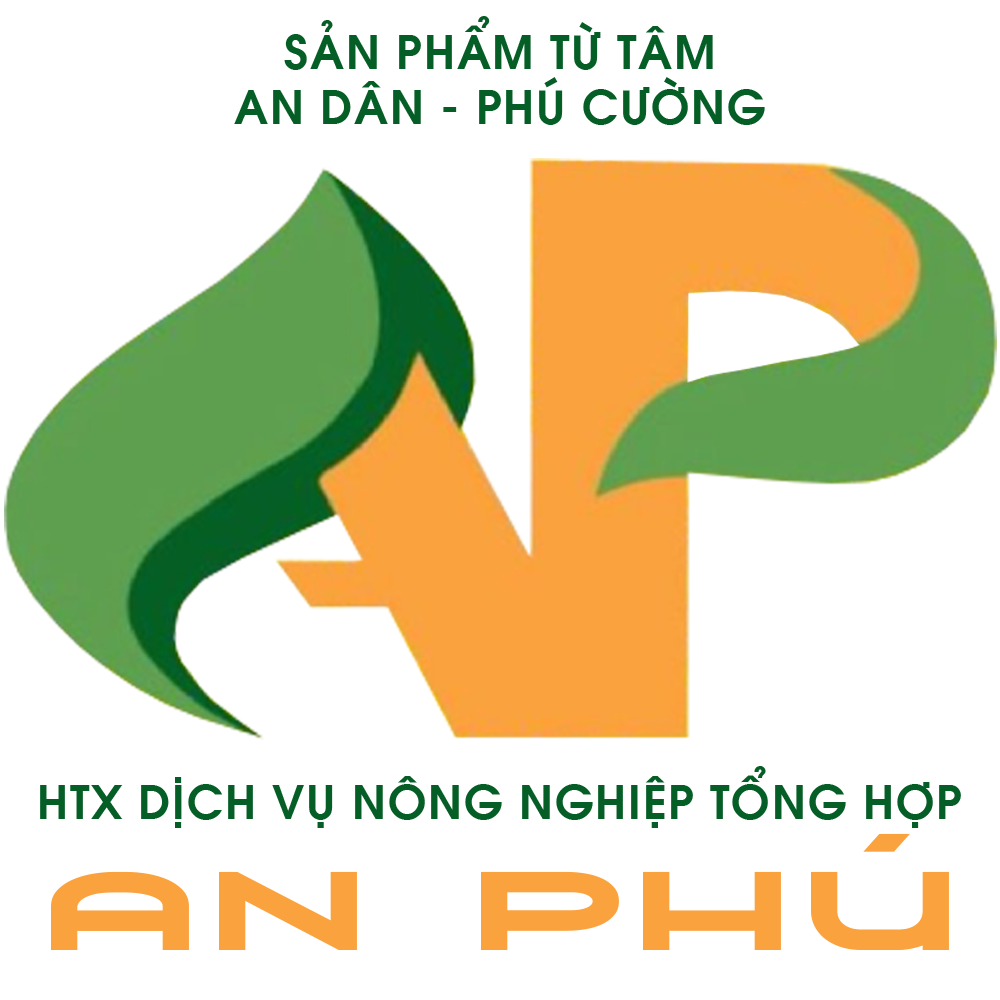
<style>
.page{position:relative;width:1000px;height:1000px;background:#ffffff}
.page>*{position:absolute;margin:0}
.t1{font:45.8px/54.2px "SVN-Avobold";letter-spacing:0.04em;color:#055e26}
.t2{font:45.8px "SVN-Avobold";letter-spacing:0.04em;color:#055e26}
.t3{font:174.6px "CAAirconaW00-Fill";letter-spacing:-0.08em;color:#faa23e;scale:1.3 1}
</style>
<div class="page">
<p class="t1" style="left:234px;top:16px;width:531px;height:109px;text-align:center">SẢN PHẨM TỪ TÂM<br>AN DÂN - PHÚ CƯỜNG</p>
<p class="t2" style="left:40px;top:766px;width:921px;height:62px">HTX DỊCH VỤ NÔNG NGHIỆP TỔNG HỢP</p>
<p class="t3" style="left:51px;top:833px;width:898px;height:117px">AN PHÚ</p>
</div>
